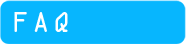
<style>
.page{position:relative;width:186px;height:44px;background:#07b6fe}
.page>*{position:absolute;margin:0}
.t1{font:25px "OCRAStd";letter-spacing:0.1em;color:#ffffff}
</style>
<div class="page">
<p class="t1" style="left:14px;top:12px;width:54px;height:20px">FAQ</p>
</div>
